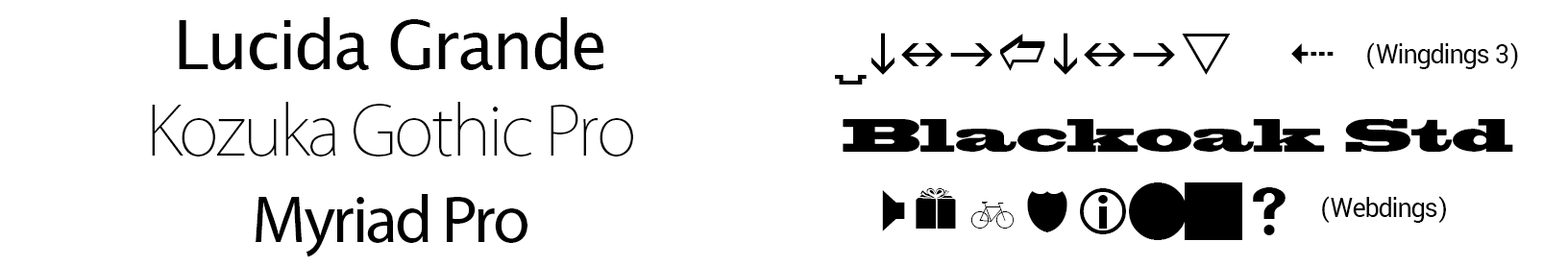
<style>
.page{position:relative;width:1568px;height:266px;background:#ffffff}
.page>*{position:absolute;margin:0}
.t1{font:67.3px/86.5px "KozGoPro-ExtraLight";letter-spacing:-0.04em;color:#000000}
.t2{font:67.3px/86.5px "LucidaGrande";letter-spacing:-0.04em;color:#000000}
.t3{font:67.3px/86.5px "MyriadPro-Regular";letter-spacing:-0.04em;color:#000000}
.t4{font:28.8px/76.9px "Yantramanav-Regular";letter-spacing:-0.04em;color:#000000}
.t5{font:57.6px/76.9px "Wingdings3";letter-spacing:-0.04em;color:#000000}
.t6{font:43.2px/76.9px "BlackoakStd";letter-spacing:-0.04em;color:#000000}
.t7{font:57.6px/76.9px "Webdings";letter-spacing:-0.04em;color:#000000}
</style>
<div class="page">
<p class="t1" style="left:152px;top:17px;width:481px;height:240px;text-align:center"><span class="t2">Lucida Grande<br></span>Kozuka Gothic Pro<br><span class="t3">Myriad Pro</span></p>
<p class="t4" style="left:835px;top:33px;width:683px;height:207px;text-align:center"><span class="t5">Wingdings 3    </span>(Wingdings 3)<br><span class="t6">Blackoak Std<br></span><span class="t7">Webdings  </span>(Webdings)</p>
</div>
